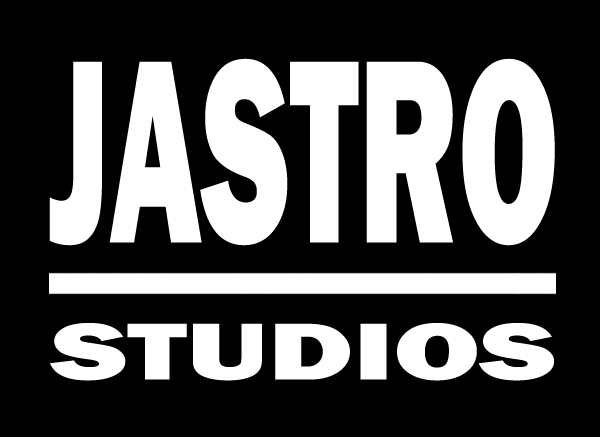
<style>
.page{position:relative;width:600px;height:437px;background:#000000}
.page>*{position:absolute;margin:0}
.t1{font:270.8px "FranklinGothic-Heavy";color:#ffffff;scale:0.54 1}
.t2{font:83.3px "FranklinGothic-Heavy";color:#ffffff;scale:1.51 1}
</style>
<div class="page">
<p class="t1" style="left:49px;top:58px;width:506px;height:188px">JASTRO</p>
<p class="t2" style="left:50px;top:323px;width:504px;height:58px">STUDIOS</p>
</div>
